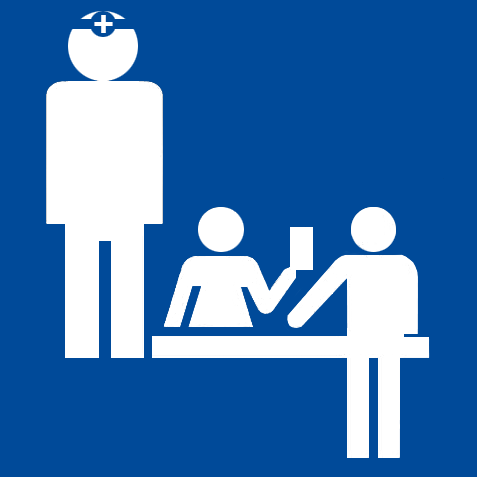
<style>
.page{position:relative;width:477px;height:477px;background:#004a99}
.page>*{position:absolute;margin:0}
.t1{font:36px "Arial-BoldMT";color:#ffffff}
</style>
<div class="page">
<p class="t1" style="left:94px;top:15px;width:19px;height:18px">+</p>
</div>
